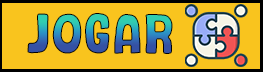
<style>
.page{position:relative;width:263px;height:72px;background:#f9c41e}
.page>*{position:absolute;margin:0}
.t1{font:53.6px "Chatlong"}
</style>
<div class="page">
<p class="t1" style="left:27px;top:13px;width:146px;height:41px">JOGAR</p>
</div>
